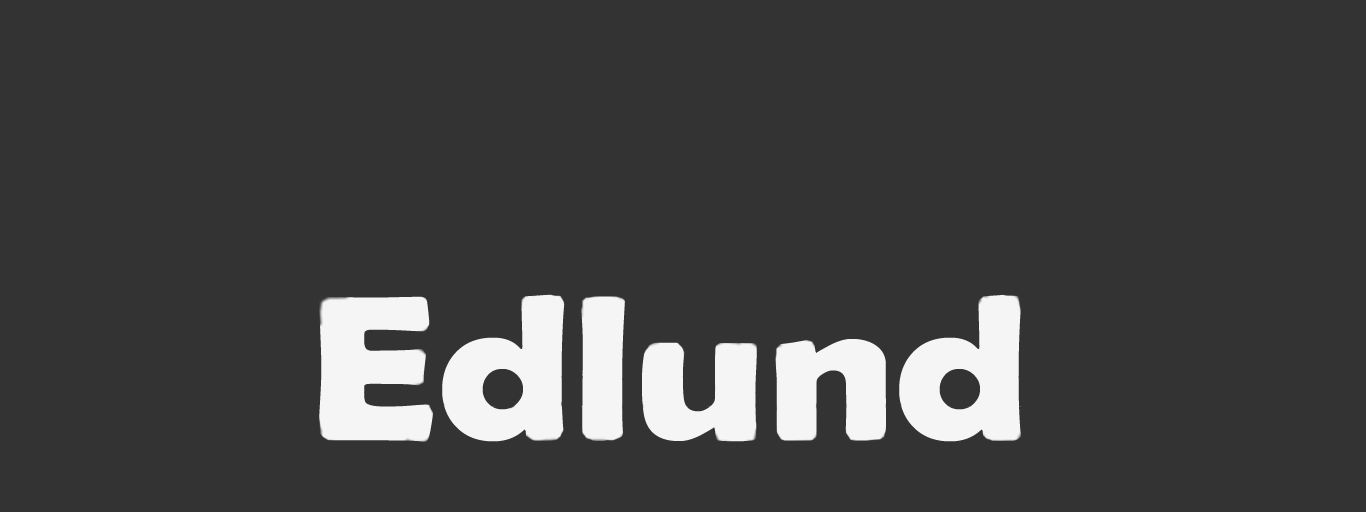
<style>
.page{position:relative;width:1366px;height:512px;background:#333333}
.page>*{position:absolute;margin:0}
.t1{font:209.1px "BerlinSansFBDemi-Bold";color:#f5f5f5;scale:1.09 1}
</style>
<div class="page">
<p class="t1" style="left:318px;top:292px;width:705px;height:150px">Edlund</p>
</div>
